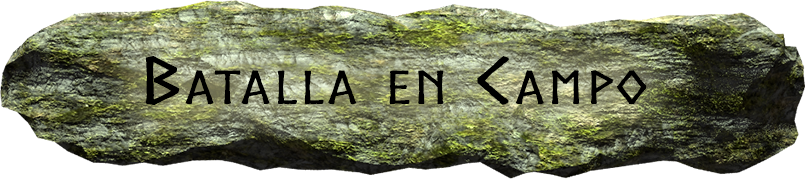
<style>
.page{position:relative;width:805px;height:179px}
.page>*{position:absolute;margin:0}
.t1{font:61.2px "Norse";color:#000000;font-variant:small-caps;font-weight:bold;scale:1.76 1}
</style>
<div class="page">
<p class="t1" style="left:145px;top:56px;width:502px;height:50px">Batalla en Campo</p>
</div>
